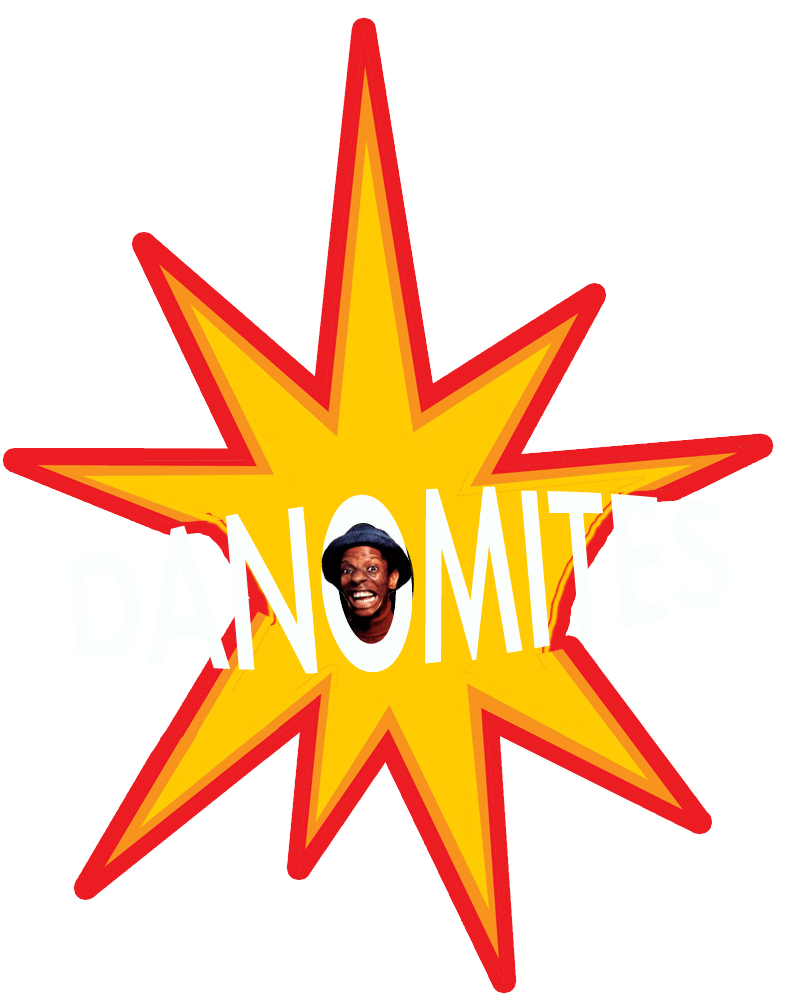
<style>
.page{position:relative;width:792px;height:1008px;background:#ffffff}
.page>*{position:absolute;margin:0}
.t1{font:145.8px "LiGothicMed";letter-spacing:0.025em;color:#fafffe}
</style>
<div class="page">
<p class="t1" style="left:69px;top:486px;width:661px;height:188px;rotate:-5deg">DANOMITES</p>
</div>
